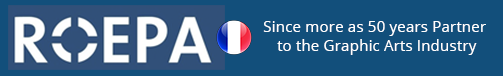
<style>
.page{position:relative;width:503px;height:76px;background:#124f7b}
.page>*{position:absolute;margin:0}
.t1{font:15.4px "OpenSans";color:#ffffff}
</style>
<div class="page">
<p class="t1" style="left:263px;top:21px;width:223px;height:34px;text-align:center">Since more as 50 years Partner <br>to the Graphic Arts Industry</p>
</div>
